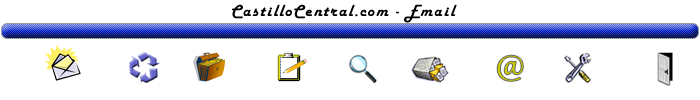
<style>
.page{position:relative;width:700px;height:100px;background:#ffffff}
.page>*{position:absolute;margin:0}
.t1{font:16.7px "HarlowSolid";letter-spacing:0.1em;color:#000000}
.t2{font:29.2px "HighTowerText-Italic";letter-spacing:0.1em;color:#cccc00}
</style>
<div class="page">
<p class="t1" style="left:232px;top:4px;width:225px;height:19px">CastilloCentral.com - Email</p>
<p class="t2" style="left:497px;top:55px;width:26px;height:26px">@</p>
</div>
